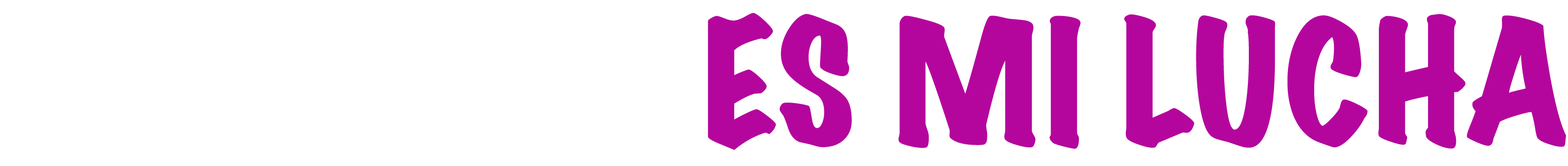
<style>
.page{position:relative;width:1568px;height:166px;background:#ffffff}
.page>*{position:absolute;margin:0}
.t1{font:154px "MarkerFelt-Wide";color:#b4069d}
.t2{font:154px "MarkerFelt-Wide";color:#ffffff}
</style>
<div class="page">
<p class="t1" style="left:0px;top:13px;width:1566px;height:137px"><span class="t2">TU LUCHA </span>ES MI LUCHA</p>
</div>
